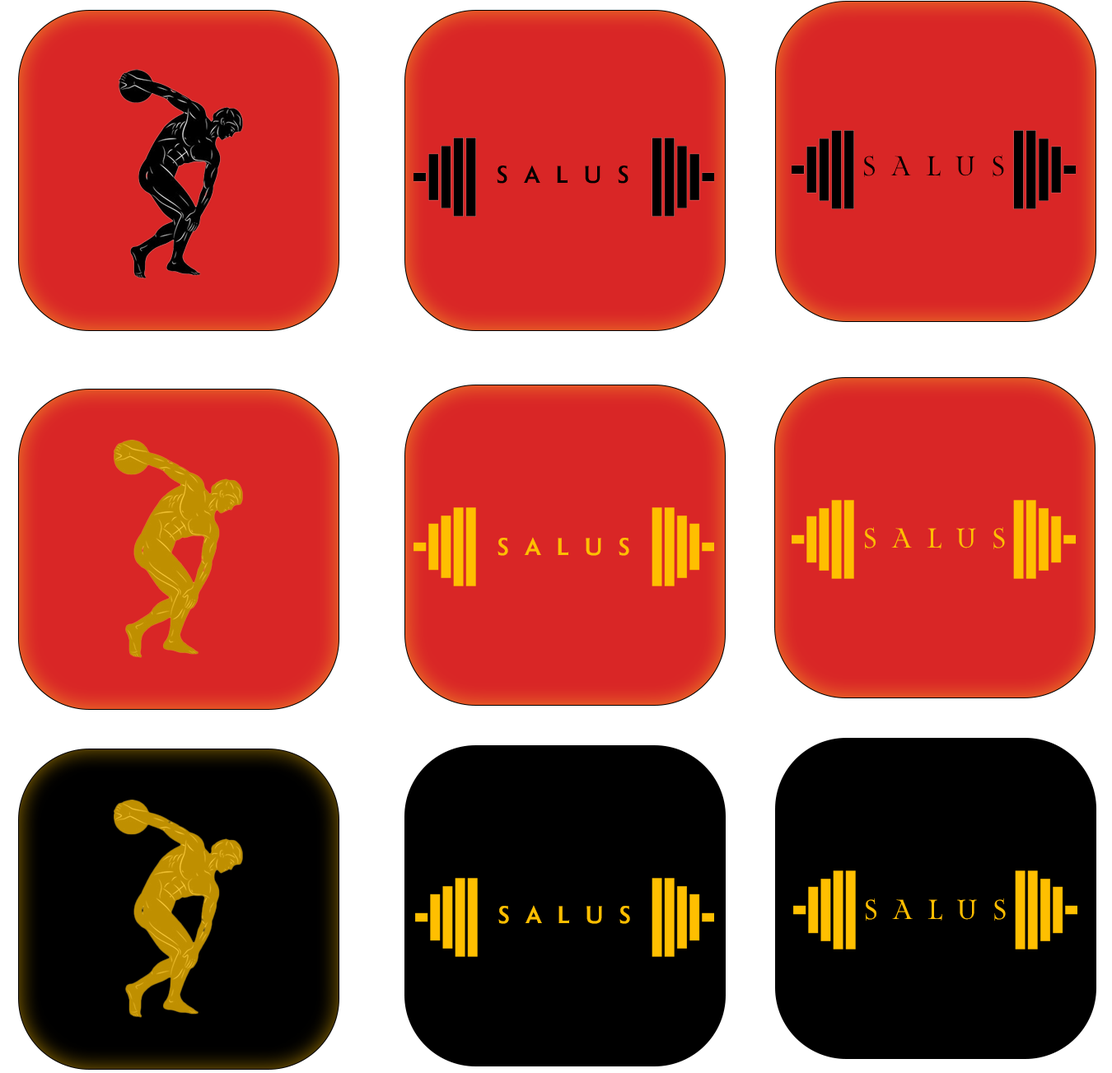
<style>
.page{position:relative;width:1112px;height:1073px;background:#d92626}
.page>*{position:absolute;margin:0}
.t1{font:25.5px "MapRomanVariableRegular_95.000wdth";letter-spacing:0.6em;color:#000000}
.t2{font:25.5px "Roma-Bold";letter-spacing:0.6em;color:#000000}
.t3{font:25.5px "MapRomanVariableRegular_95.000wdth";letter-spacing:0.6em;color:#ffbf00}
.t4{font:25.5px "Roma-Bold";letter-spacing:0.6em;color:#ffbf00}
</style>
<div class="page">
<p class="t1" style="left:864px;top:155px;width:140px;height:22px">SALUS</p>
<p class="t2" style="left:496px;top:165px;width:132px;height:19px">SALUS</p>
<p class="t3" style="left:865px;top:527px;width:139px;height:22px">SALUS</p>
<p class="t4" style="left:497px;top:537px;width:132px;height:19px">SALUS</p>
<p class="t4" style="left:498px;top:905px;width:132px;height:19px">SALUS</p>
<p class="t3" style="left:865px;top:898px;width:140px;height:22px">SALUS</p>
</div>
